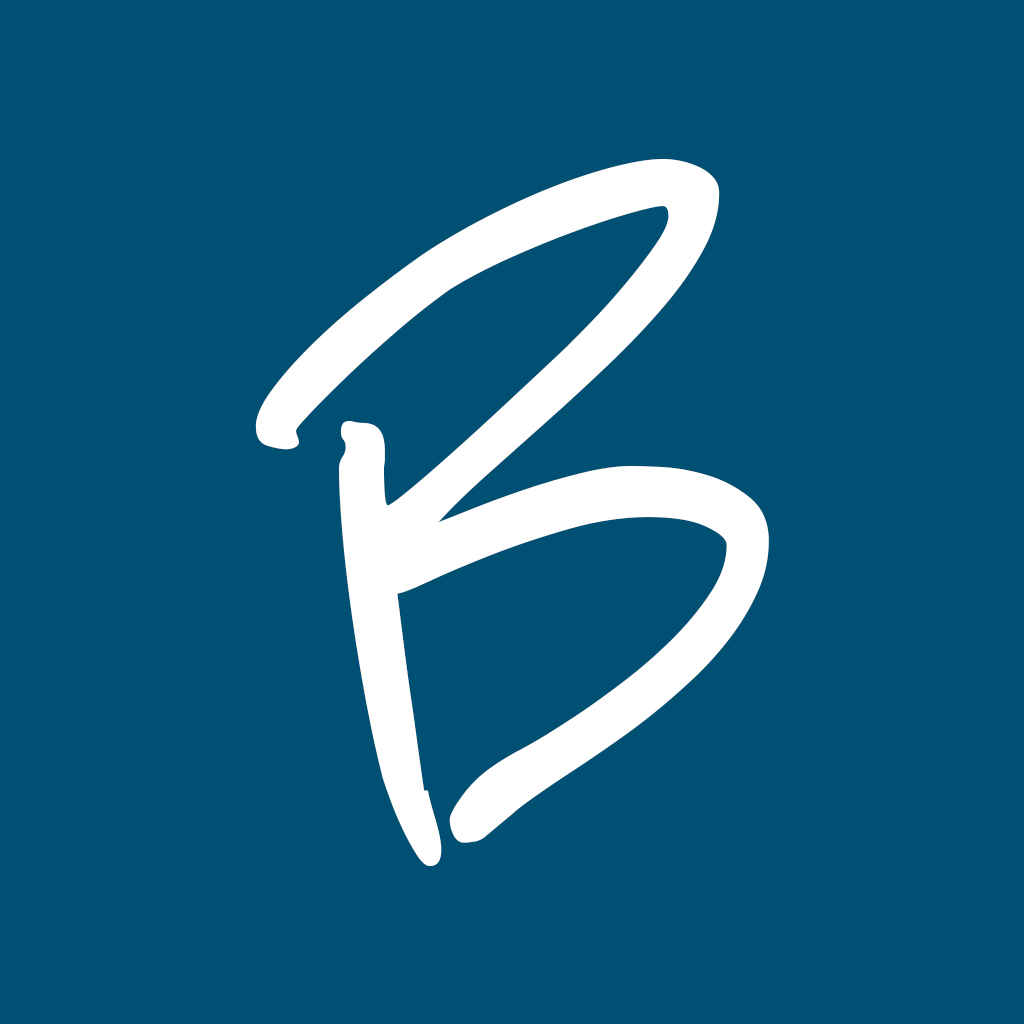
<style>
.page{position:relative;width:1024px;height:1024px;background:#005073}
.page>*{position:absolute;margin:0}
.t1{font:1005px "ReenieBeanie";letter-spacing:0.03em;color:#ffffff;scale:0.95 1}
</style>
<div class="page">
<p class="t1" style="left:255px;top:159px;width:514px;height:707px">B</p>
</div>
